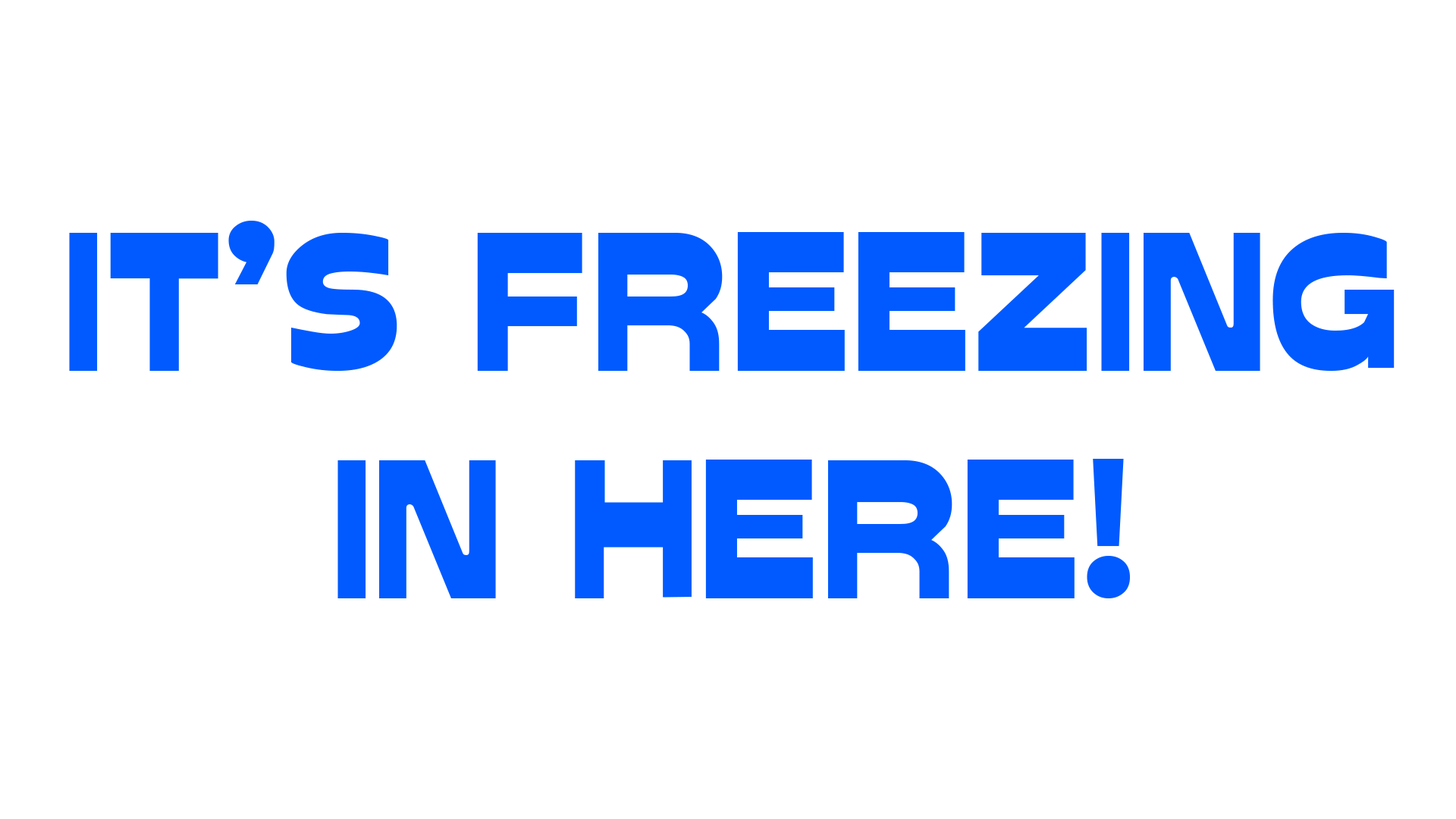
<style>
.page{position:relative;width:1456px;height:819px;background:#ffffff}
.page>*{position:absolute;margin:0}
.t1{font:189.6px "Glockenspiel";color:#005aff}
</style>
<div class="page">
<p class="t1" style="left:69px;top:221px;width:1326px;height:377px;text-align:center">IT’S FREEZING<br>IN HERE!</p>
</div>
